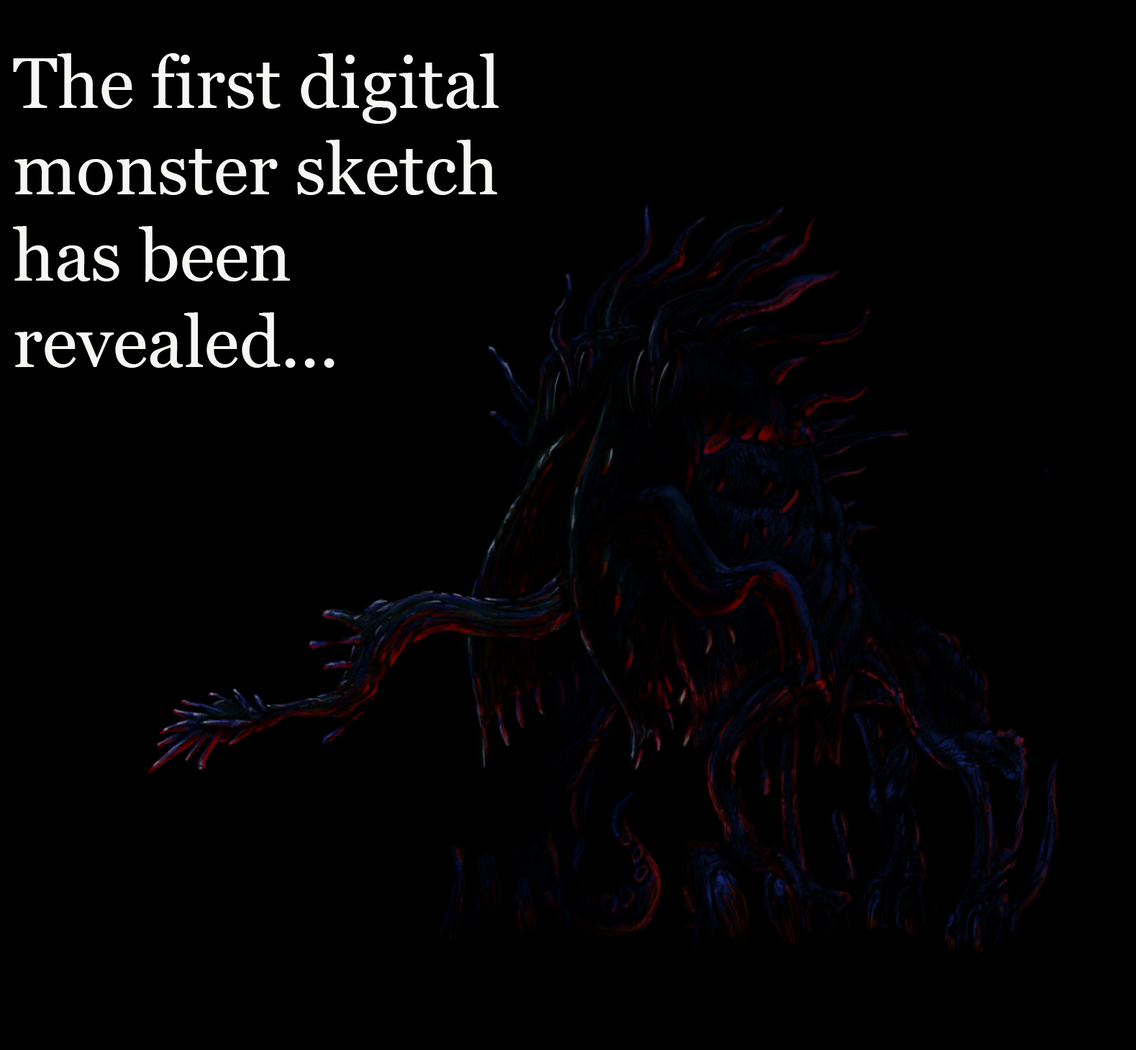
<style>
.page{position:relative;width:1136px;height:1050px;background:#000000}
.page>*{position:absolute;margin:0}
.t1{font:71.9px "Georgia";color:#f6f6f4}
</style>
<div class="page">
<p class="t1" style="left:13px;top:53px;width:486px;height:315px">The first digital monster sketch has been <br>revealed...</p>
</div>
